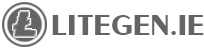
<style>
.page{position:relative;width:204px;height:49px;background:#ffffff}
.page>*{position:absolute;margin:0}
.t1{font:28px "MontereyFLF-Bold";color:#646464}
</style>
<div class="page">
<p class="t1" style="left:52px;top:15px;width:152px;height:20px">LITEGEN.IE</p>
</div>
